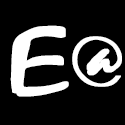
<style>
.page{position:relative;width:125px;height:125px;background:#000000}
.page>*{position:absolute;margin:0}
.t1{font:72px "VNI-Thufap1";color:#ffffff;font-weight:bold}
</style>
<div class="page">
<p class="t1" style="left:10px;top:25px;width:112px;height:72px">E@</p>
</div>
